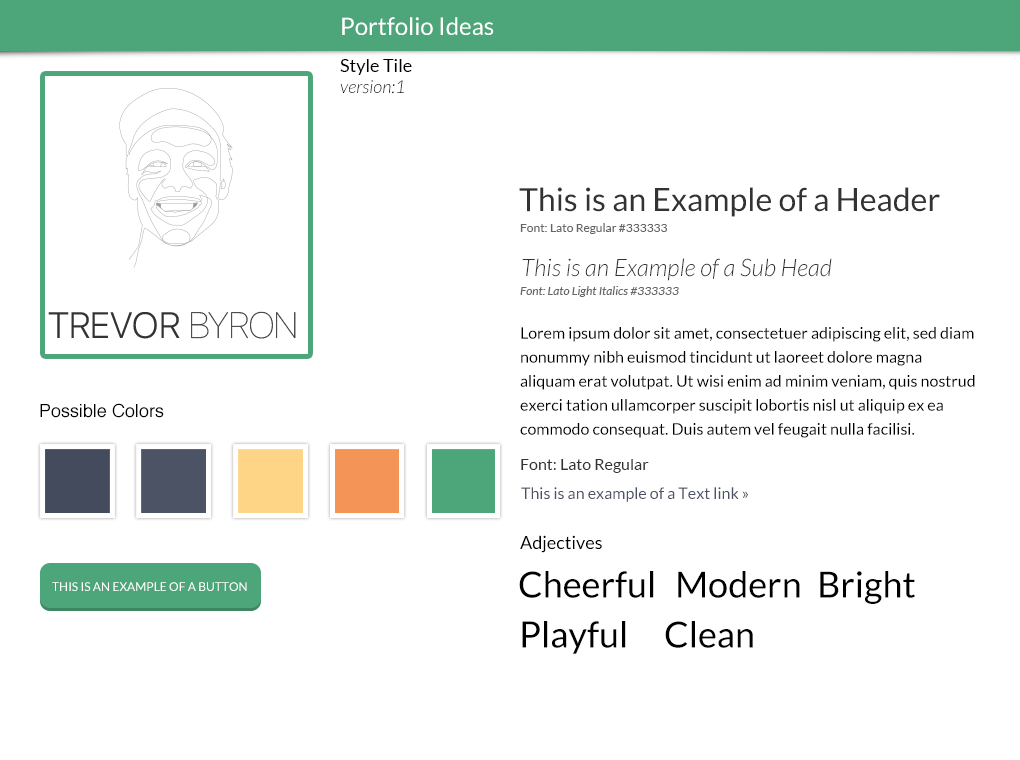
<style>
.page{position:relative;width:1020px;height:760px;background:#ffffff}
.page>*{position:absolute;margin:0}
.t1{font:24px "Lato-Regular";color:#ffffff}
.t2{font:18px "Lato-Regular";color:#000000}
.t3{font:18px "Lato-LightItalic";color:#000000}
.t4{font:32px "Lato-Regular";color:#333333}
.t5{font:12px "Lato-Regular";color:#666666}
.t6{font:24px "Lato-LightItalic";color:#333333}
.t7{font:12px "Lato-Italic";color:#666666}
.t8{font:16px/24px "Lato-Regular";color:#000000}
.t9{font:18px "Helvetica";color:#000000}
.t10{font:16px "Lato-Regular";color:#333333}
.t11{font:16px "Lato-Regular";color:#4c5365}
.t12{font:12px "Lato-Regular";color:#ffffff;text-transform:uppercase}
.t13{font:36px "Lato-Regular";color:#000000}
</style>
<div class="page">
<p class="t1" style="left:342px;top:17px;width:152px;height:18px">Portfolio Ideas</p>
<p class="t2" style="left:340px;top:59px;width:72px;height:16px">Style Tile</p>
<p class="t3" style="left:340px;top:80px;width:64px;height:14px">version:1</p>
<p class="t4" style="left:519px;top:187px;width:421px;height:30px">This is an Example of a Header</p>
<p class="t5" style="left:520px;top:223px;width:147px;height:11px">Font: Lato Regular #333333</p>
<p class="t6" style="left:522px;top:258px;width:310px;height:23px">This is an Example of a Sub Head</p>
<p class="t7" style="left:520px;top:286px;width:159px;height:11px">Font: Lato Light Italics #333333</p>
<p class="t8" style="left:520px;top:327px;width:455px;height:111px">Lorem ipsum dolor sit amet, consectetuer adipiscing elit, sed diam nonummy nibh euismod tincidunt ut laoreet dolore magna aliquam erat volutpat. Ut wisi enim ad minim veniam, quis nostrud exerci tation ullamcorper suscipit lobortis nisl ut aliquip ex ea commodo consequat. Duis autem vel feugait nulla facilisi.</p>
<p class="t9" style="left:40px;top:403px;width:124px;height:15px">Possible Colors</p>
<p class="t10" style="left:521px;top:459px;width:128px;height:14px">Font: Lato Regular</p>
<p class="t11" style="left:521px;top:487px;width:227px;height:15px">This is an example of a Text link »</p>
<p class="t2" style="left:520px;top:535px;width:82px;height:18px">Adjectives</p>
<p class="t12" style="left:52px;top:582px;width:195px;height:9px">This is an example of a Button</p>
<p class="t13" style="left:519px;top:571px;width:135px;height:27px">Cheerful</p>
<p class="t13" style="left:678px;top:571px;width:122px;height:27px">Modern</p>
<p class="t13" style="left:820px;top:571px;width:95px;height:33px">Bright</p>
<p class="t13" style="left:522px;top:621px;width:104px;height:33px">Playful</p>
<p class="t13" style="left:665px;top:621px;width:88px;height:27px">Clean</p>
</div>
